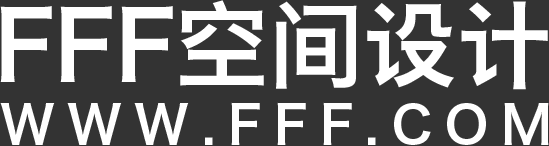
<style>
.page{position:relative;width:549px;height:146px;background:#333333}
.page>*{position:absolute;margin:0}
.t1{font:94.3px "HiraginoSansGB-W6";color:#ffffff}
.t2{font:51.8px "HiraginoSansGB-W6";letter-spacing:0.24em;color:#ffffff}
</style>
<div class="page">
<p class="t1" style="left:0px;top:0px;width:548px;height:90px">FFF空间设计</p>
<p class="t2" style="left:0px;top:102px;width:549px;height:43px">WWW.FFF.COM</p>
</div>
